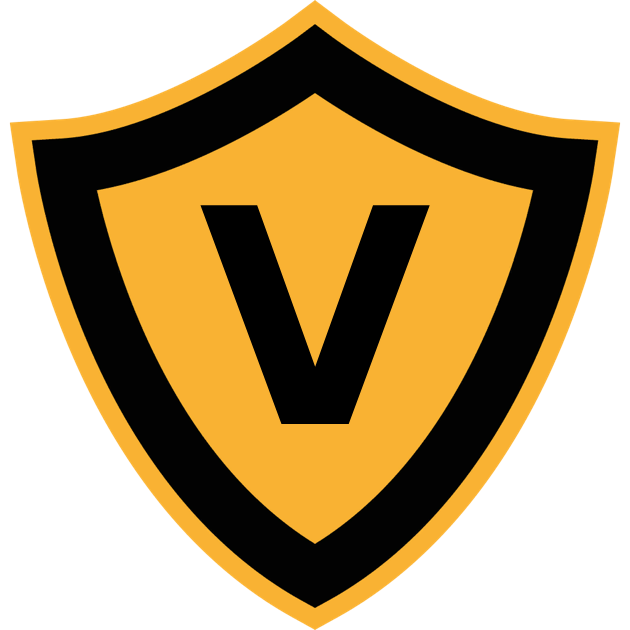
<style>
.page{position:relative;width:630px;height:630px;background:#ffffff}
.page>*{position:absolute;margin:0}
.t1{font:300px "DejaVuSans-Bold";color:#000000}
</style>
<div class="page">
<p class="t1" style="left:200px;top:205px;width:230px;height:219px">V</p>
</div>
